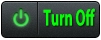
<style>
.page{position:relative;width:101px;height:40px}
.page>*{position:absolute;margin:0}
.t1{font:23.2px "MyriadPro-Bold";color:#00ff00;scale:0.6 1}
</style>
<div class="page">
<p class="t1" style="left:43px;top:8px;width:52px;height:18px">Turn Off</p>
</div>
